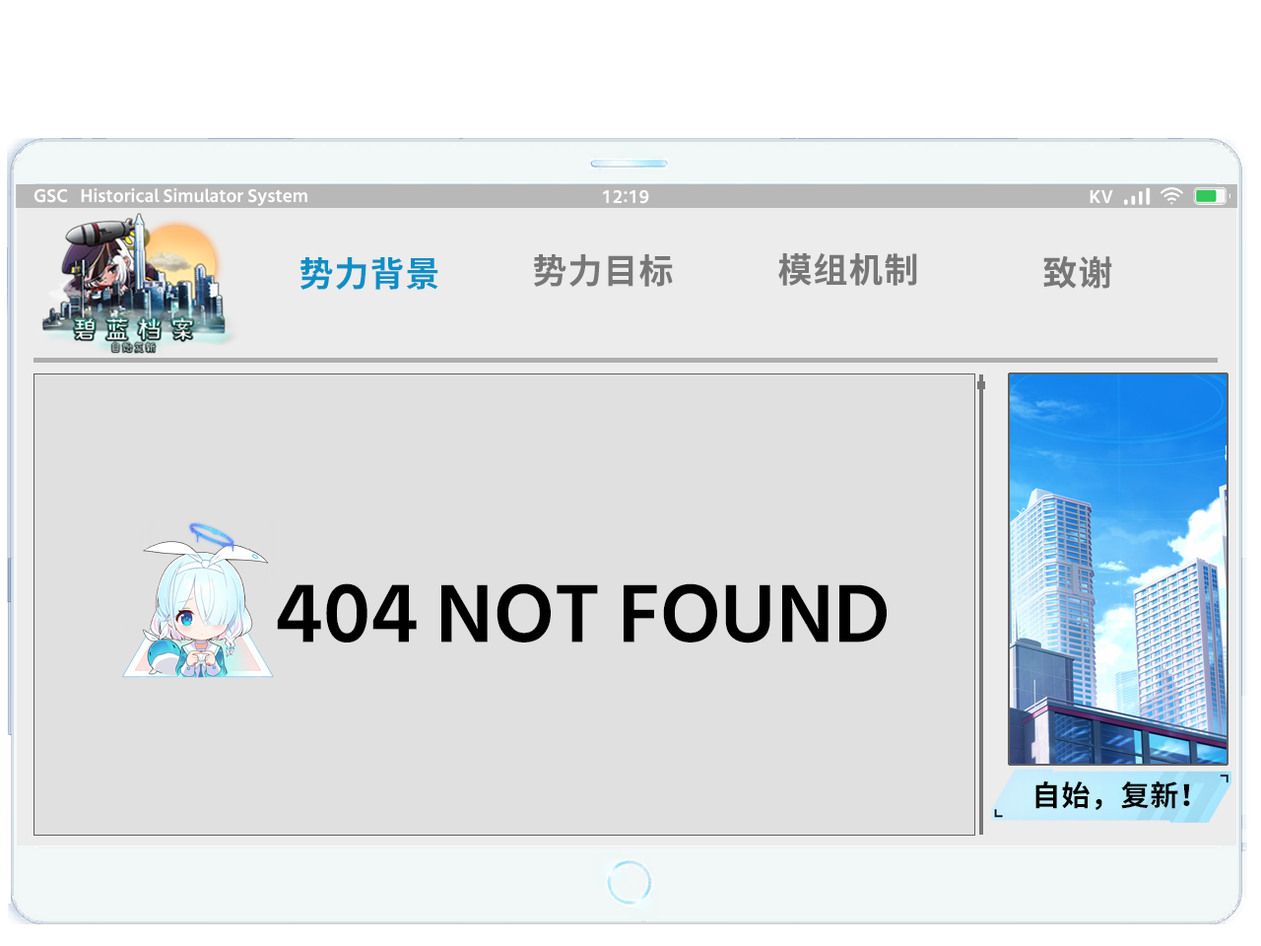
<style>
.page{position:relative;width:1261px;height:946px;background:#e0e0e0}
.page>*{position:absolute;margin:0}
.t1{font:17.7px "LXGW975GothicSC-600W";color:#ffffff}
.t2{font:35.5px "LXGW975GothicSC-600W";color:#0d8fc5}
.t3{font:35.5px "LXGW975GothicSC-600W";color:#777777}
.t4{font:78.8px "LXGW975GothicSC-600W";color:#000000}
.t5{font:29.6px "LXGW975GothicSC-600W";color:#000000}
</style>
<div class="page">
<p class="t1" style="left:33px;top:188px;width:274px;height:18px">GSC   Historical Simulator System</p>
<p class="t1" style="left:603px;top:190px;width:46px;height:14px">12:19</p>
<p class="t1" style="left:1090px;top:190px;width:23px;height:13px">KV</p>
<p class="t2" style="left:300px;top:257px;width:138px;height:33px">势力背景</p>
<p class="t3" style="left:534px;top:254px;width:139px;height:33px">势力目标</p>
<p class="t3" style="left:778px;top:252px;width:139px;height:34px">模组机制</p>
<p class="t3" style="left:1043px;top:256px;width:69px;height:33px">致谢</p>
<p class="t4" style="left:277px;top:583px;width:610px;height:60px">404 NOT FOUND</p>
<p class="t5" style="left:1035px;top:780px;width:155px;height:30px">自始，复新！</p>
</div>
